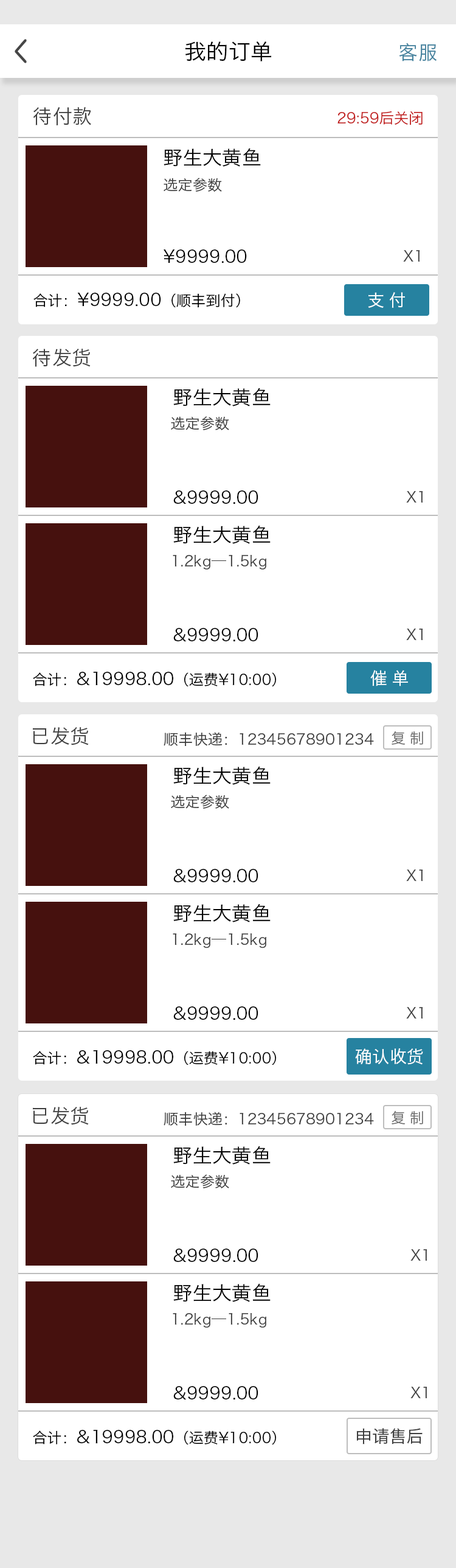
<style>
.page{position:relative;width:456px;height:1568px;background:#ffffff}
.page>*{position:absolute;margin:0}
.t1{font:21.9px "HiraginoSansGB-W3";color:#000000}
.t2{font:19.5px "HiraginoSansGB-W3";color:#42819d}
.t3{font:19.5px "HiraginoSansGB-W3";color:#3d3d3d}
.t4{font:14.6px "HiraginoSansGB-W3";color:#c11b1b}
.t5{font:19.5px "HiraginoSansGB-W3";color:#000000}
.t6{font:14.6px "HiraginoSansGB-W3";color:#3d3d3d}
.t7{font:17px "HiraginoSansGB-W3";color:#000000}
.t8{font:14.6px "HiraginoSansGB-W3";color:#000000}
.t9{font:17px "HiraginoSansGB-W3";color:#ffffff}
.t10{font:14.6px "HiraginoSansGB-W3";color:#6e6e6e}
.t11{font:17px "HiraginoSansGB-W3";color:#3d3d3d}
</style>
<div class="page">
<p class="t1" style="left:186px;top:41px;width:86px;height:20px">我的订单</p>
<p class="t2" style="left:399px;top:43px;width:38px;height:18px">客服</p>
<p class="t3" style="left:33px;top:107px;width:58px;height:18px">待付款</p>
<p class="t4" style="left:338px;top:111px;width:85px;height:14px">29:59后关闭</p>
<p class="t5" style="left:164px;top:148px;width:97px;height:19px">野生大黄鱼</p>
<p class="t6" style="left:164px;top:178px;width:58px;height:14px">选定参数</p>
<p class="t7" style="left:163px;top:249px;width:84px;height:14px">¥9999.00</p>
<p class="t6" style="left:403px;top:250px;width:17px;height:12px">X1</p>
<p class="t7" style="left:33px;top:293px;width:207px;height:14px"><span class="t8">合计：</span>¥9999.00<span class="t8">（顺丰到付）</span></p>
<p class="t9" style="left:368px;top:292px;width:37px;height:16px">支 付</p>
<p class="t3" style="left:32px;top:349px;width:59px;height:18px">待发货</p>
<p class="t5" style="left:173px;top:388px;width:98px;height:18px">野生大黄鱼</p>
<p class="t6" style="left:171px;top:416px;width:58px;height:14px">选定参数</p>
<p class="t7" style="left:173px;top:490px;width:86px;height:14px">&amp;9999.00</p>
<p class="t6" style="left:406px;top:491px;width:17px;height:12px">X1</p>
<p class="t5" style="left:173px;top:525px;width:98px;height:19px">野生大黄鱼</p>
<p class="t6" style="left:173px;top:554px;width:94px;height:16px">1.2kg—1.5kg</p>
<p class="t7" style="left:173px;top:628px;width:86px;height:13px">&amp;9999.00</p>
<p class="t6" style="left:406px;top:629px;width:17px;height:11px">X1</p>
<p class="t8" style="left:33px;top:672px;width:243px;height:14px">合计：<span class="t7">&amp;19998.00</span>（运费¥10:00）</p>
<p class="t9" style="left:371px;top:670px;width:37px;height:16px">催 单</p>
<p class="t3" style="left:33px;top:727px;width:56px;height:18px">已发货</p>
<p class="t6" style="left:164px;top:732px;width:210px;height:14px">顺丰快递：12345678901234</p>
<p class="t10" style="left:392px;top:731px;width:31px;height:14px">复 制</p>
<p class="t5" style="left:173px;top:766px;width:98px;height:19px">野生大黄鱼</p>
<p class="t6" style="left:171px;top:795px;width:58px;height:14px">选定参数</p>
<p class="t7" style="left:173px;top:869px;width:86px;height:13px">&amp;9999.00</p>
<p class="t6" style="left:406px;top:869px;width:17px;height:12px">X1</p>
<p class="t5" style="left:173px;top:904px;width:98px;height:18px">野生大黄鱼</p>
<p class="t6" style="left:173px;top:933px;width:94px;height:15px">1.2kg—1.5kg</p>
<p class="t7" style="left:173px;top:1006px;width:86px;height:14px">&amp;9999.00</p>
<p class="t6" style="left:406px;top:1007px;width:17px;height:12px">X1</p>
<p class="t9" style="left:355px;top:1048px;width:68px;height:17px">确认收货</p>
<p class="t8" style="left:33px;top:1050px;width:243px;height:15px">合计：<span class="t7">&amp;19998.00</span>（运费¥10:00）</p>
<p class="t3" style="left:33px;top:1107px;width:56px;height:18px">已发货</p>
<p class="t6" style="left:164px;top:1112px;width:210px;height:14px">顺丰快递：12345678901234</p>
<p class="t10" style="left:392px;top:1110px;width:31px;height:14px">复 制</p>
<p class="t5" style="left:173px;top:1146px;width:98px;height:19px">野生大黄鱼</p>
<p class="t6" style="left:171px;top:1174px;width:58px;height:14px">选定参数</p>
<p class="t7" style="left:173px;top:1249px;width:86px;height:13px">&amp;9999.00</p>
<p class="t6" style="left:411px;top:1249px;width:17px;height:12px">X1</p>
<p class="t5" style="left:173px;top:1283px;width:98px;height:19px">野生大黄鱼</p>
<p class="t6" style="left:173px;top:1312px;width:94px;height:16px">1.2kg—1.5kg</p>
<p class="t7" style="left:173px;top:1386px;width:86px;height:13px">&amp;9999.00</p>
<p class="t6" style="left:411px;top:1387px;width:17px;height:11px">X1</p>
<p class="t8" style="left:33px;top:1430px;width:243px;height:14px">合计：<span class="t7">&amp;19998.00</span>（运费¥10:00）</p>
<p class="t11" style="left:357px;top:1428px;width:66px;height:16px">申请售后</p>
</div>
